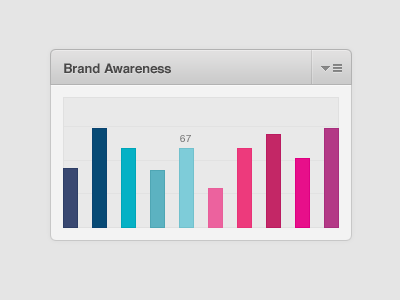
<style>
.page{position:relative;width:400px;height:300px;background:#e5e5e5}
.page>*{position:absolute;margin:0}
.t1{font:13px "Helvetica-Bold";color:#484747}
</style>
<div class="page">
<p class="t1" style="left:64px;top:63px;width:107px;height:11px">Brand Awareness</p>
</div>
